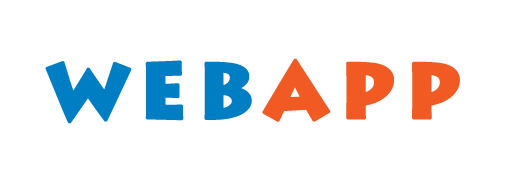
<style>
.page{position:relative;width:519px;height:183px;background:#ffffff}
.page>*{position:absolute;margin:0}
.t1{font:78px "LithosPro-Black";letter-spacing:0.1em;color:#007ec3;text-transform:uppercase;font-weight:bold}
.t2{font:78px "LithosPro-Black";letter-spacing:0.1em;color:#f15a23;text-transform:uppercase;font-weight:bold}
</style>
<div class="page">
<p class="t1" style="left:45px;top:58px;width:415px;height:66px">web<span class="t2">app</span></p>
</div>
